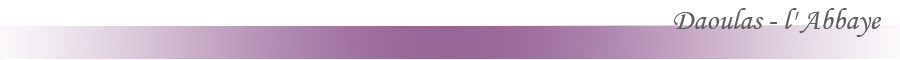
<style>
.page{position:relative;width:900px;height:60px;background:#ffffff}
.page>*{position:absolute;margin:0}
.t1{font:30px "MonotypeCorsiva";color:#5d5d5d}
</style>
<div class="page">
<p class="t1" style="left:673px;top:8px;width:209px;height:29px">Daoulas - l' Abbaye</p>
</div>
